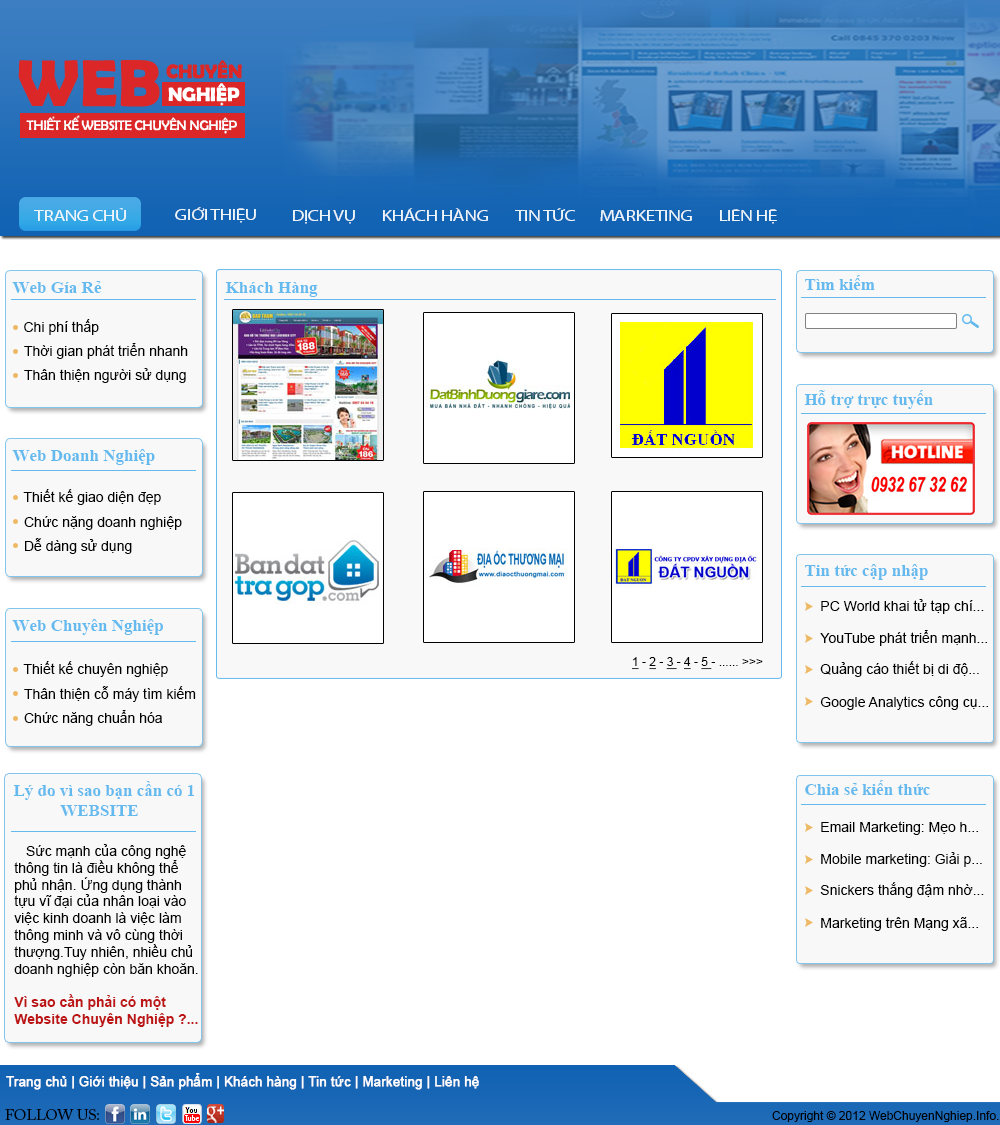
<style>
.page{position:relative;width:1000px;height:1125px;background:#ffffff}
.page>*{position:absolute;margin:0}
.t1{font:15px "MyriadPro-Regular";letter-spacing:-0.05em;color:#eef6fb;text-transform:uppercase;scale:1.3 1}
.t2{font:17px "TimesNewRomanPS-BoldMT";color:#64baee}
.t3{font:14px "ArialMT";color:#000000}
.t4{font:12px "ArialMT";color:#000000}
.t5{font:12px "ArialMT";color:#000000;text-decoration:underline}
.t6{font:17.4px "TimesNewRomanPS-BoldMT";color:#64baee}
.t7{font:14px "Arial-BoldMT";color:#bd1515}
.t8{font:13px "ArialMT";color:#ffffff;font-weight:bold}
.t9{font:15px "ACaslonPro-Regular";color:#000000}
</style>
<div class="page">
<p class="t1" style="left:34px;top:208px;width:92px;height:13px">trang chủ</p>
<p class="t1" style="left:175px;top:207px;width:81px;height:16px">giới thiệu</p>
<p class="t1" style="left:383px;top:208px;width:105px;height:13px">kHÁCH HÀNG</p>
<p class="t1" style="left:515px;top:208px;width:60px;height:13px">TIN TỨC</p>
<p class="t1" style="left:720px;top:209px;width:57px;height:15px">lIÊN HỆ</p>
<p class="t1" style="left:293px;top:210px;width:62px;height:14px">DỊCH VỤ</p>
<p class="t1" style="left:600px;top:210px;width:92px;height:11px">marketing</p>
<p class="t2" style="left:12px;top:281px;width:90px;height:12px">Web Gía Rẻ</p>
<p class="t2" style="left:805px;top:275px;width:70px;height:15px">Tìm kiếm</p>
<p class="t2" style="left:225px;top:282px;width:93px;height:15px">Khách Hàng</p>
<p class="t3" style="left:24px;top:319px;width:75px;height:16px">Chi phí thấp</p>
<p class="t3" style="left:24px;top:343px;width:164px;height:16px">Thời gian phát triển nhanh</p>
<p class="t3" style="left:24px;top:368px;width:162px;height:15px">Thân thiện người sử dụng</p>
<p class="t2" style="left:804px;top:390px;width:129px;height:19px">Hỗ trợ trực tuyến</p>
<p class="t2" style="left:12px;top:449px;width:143px;height:16px">Web Doanh Nghiệp</p>
<p class="t3" style="left:23px;top:489px;width:138px;height:16px">Thiết kế giao diện đẹp</p>
<p class="t3" style="left:24px;top:516px;width:158px;height:14px">Chức nặng doanh nghiệp</p>
<p class="t3" style="left:25px;top:538px;width:107px;height:16px">Dễ dàng sử dụng</p>
<p class="t2" style="left:805px;top:564px;width:123px;height:16px">Tin tức cập nhập</p>
<p class="t3" style="left:821px;top:599px;width:163px;height:15px">PC World khai tử tạp chí...</p>
<p class="t2" style="left:12px;top:619px;width:151px;height:16px">Web Chuyên Nghiệp</p>
<p class="t3" style="left:820px;top:630px;width:167px;height:16px">YouTube phát triển mạnh...</p>
<p class="t3" style="left:23px;top:661px;width:145px;height:16px">Thiết kế chuyên nghiệp</p>
<p class="t4" style="left:632px;top:657px;width:131px;height:13px"><span class="t5">1</span> - <span class="t5">2</span> - <span class="t5">3 </span>- <span class="t5">4</span> - <span class="t5">5 </span>- ...... &gt;&gt;&gt;</p>
<p class="t3" style="left:820px;top:661px;width:159px;height:16px">Quảng cáo thiết bị di độ...</p>
<p class="t3" style="left:24px;top:686px;width:172px;height:16px">Thân thiện cỗ máy tìm kiếm</p>
<p class="t3" style="left:820px;top:696px;width:168px;height:14px">Google Analytics công cụ...</p>
<p class="t3" style="left:24px;top:710px;width:138px;height:16px">Chức năng chuẩn hóa</p>
<p class="t6" style="left:13px;top:781px;width:181px;height:35px">Lý do vì sao bạn cần có 1<br>           WEBSITE</p>
<p class="t2" style="left:805px;top:780px;width:125px;height:15px">Chia sẻ kiến thức</p>
<p class="t3" style="left:821px;top:821px;width:157px;height:14px">Email Marketing: Mẹo h...</p>
<p class="t3" style="left:14px;top:844px;width:184px;height:183px">Sức mạnh của công nghệ<br>thông tin là điều không thể<br>phủ nhận. Ứng dụng thành<br>tựu vĩ đại của nhân loại vào<br>việc kinh doanh là việc làm<br>thông minh và vô cùng thời<br>thượng.Tuy nhiên, nhiều chủ<br>doanh nghiệp còn băn khoăn.<br><br><span class="t7">Vì sao cần phải có một<br>Website Chuyên Nghiệp ?...</span></p>
<p class="t3" style="left:821px;top:852px;width:161px;height:15px">Mobile marketing: Giải p...</p>
<p class="t3" style="left:820px;top:882px;width:164px;height:16px">Snickers thắng đậm nhờ...</p>
<p class="t3" style="left:821px;top:917px;width:157px;height:14px">Marketing trên Mạng xã...</p>
<p class="t8" style="left:6px;top:1073px;width:473px;height:17px">Trang chủ | Giới thiệu | Sản phẩm | Khách hàng | Tin tức | Marketing | Liên hệ</p>
<p class="t9" style="left:5px;top:1109px;width:94px;height:12px">FOLLOW US:</p>
<p class="t4" style="left:772px;top:1111px;width:227px;height:11px">Copyright © 2012 WebChuyenNghiep.Info.</p>
</div>
